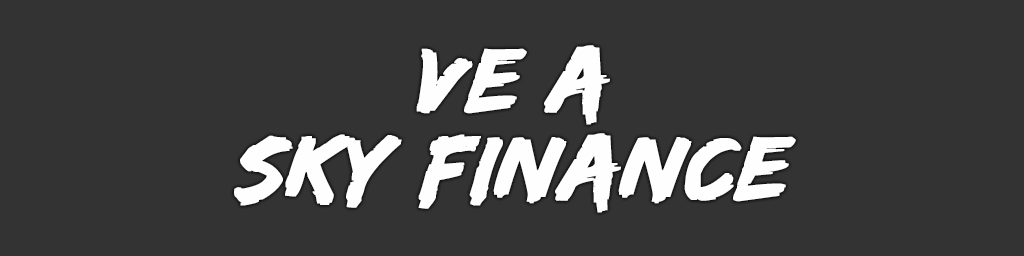
<style>
.page{position:relative;width:1024px;height:256px;background:#333333}
.page>*{position:absolute;margin:0}
.t1{font:94px/88px "EdoSZ";color:#fefefe;font-weight:bold;font-style:italic;scale:1.04 1}
</style>
<div class="page">
<p class="t1" style="left:234px;top:45px;width:562px;height:168px;text-align:center">ve a<br>sky finance</p>
</div>
